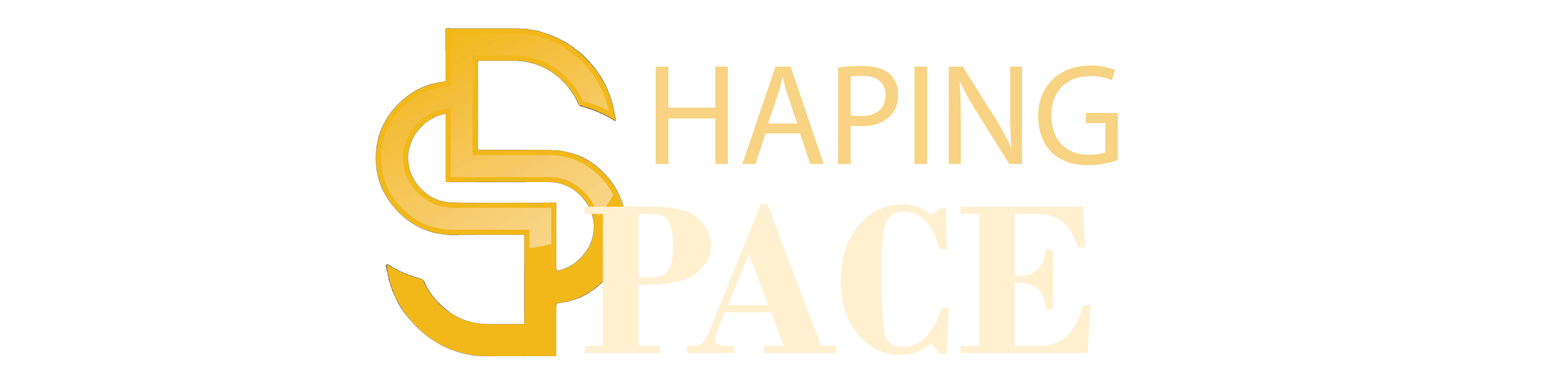
<style>
.page{position:relative;width:1568px;height:384px;background:#ffffff}
.page>*{position:absolute;margin:0}
.t1{font:201.7px "MyriadArabic-Regular";color:#f8d383}
.t2{font:223.4px "BodoniMT-Bold";color:#fff0d0}
</style>
<div class="page">
<p class="t1" style="left:655px;top:65px;width:463px;height:100px">HAPING</p>
<p class="t2" style="left:584px;top:204px;width:507px;height:151px">PACE</p>
</div>
